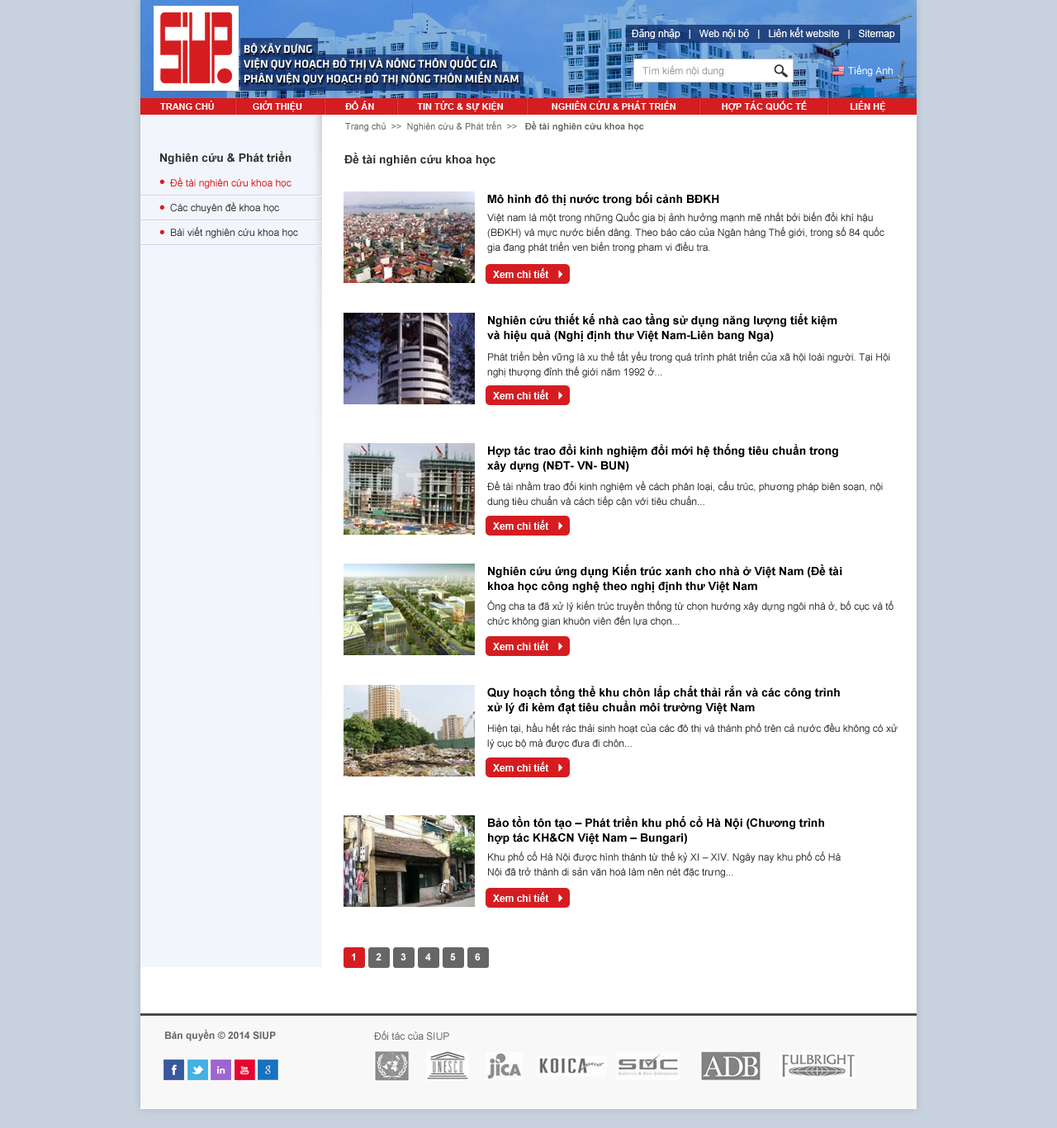
<style>
.page{position:relative;width:1057px;height:1128px;background:#ffffff}
.page>*{position:absolute;margin:0}
.t1{font:9.1px "ArialMT";color:#666666}
.t2{font:9.1px "Arial-BoldMT";color:#666666}
.t3{font:11.6px "Arial-BoldMT";color:#333333}
.t4{font:9.9px/24.8px "ArialMT";color:#333333}
.t5{font:9.9px/24.8px "ArialMT";color:#d51d21}
.t6{font:11.6px "Arial-BoldMT";color:#000000}
.t7{font:9.9px/14.9px "ArialMT";color:#333333}
.t8{font:9.9px "Arial-BoldMT";color:#ffffff}
.t9{font:11.6px/14.9px "Arial-BoldMT";color:#000000}
.t10{font:9.9px "Arial-BoldMT";color:#666666}
.t11{font:9.9px "ArialMT";color:#666666}
</style>
<div class="page">
<p class="t1" style="left:345px;top:121px;width:299px;height:11px">Trang chủ  &gt;&gt;  Nghiên cứu &amp; Phát trển  &gt;&gt;   <span class="t2">Đề tài nghiên cứu khoa học</span></p>
<p class="t3" style="left:160px;top:151px;width:131px;height:13px">Nghiên cứu &amp; Phát triển</p>
<p class="t3" style="left:344px;top:153px;width:151px;height:13px">Đề tài nghiên cứu khoa học</p>
<p class="t4" style="left:170px;top:177px;width:128px;height:62px"><span class="t5">Đề tài nghiên cứu khoa học<br></span>Các chuyên đề khoa học<br>Bài viết nghiên cứu khoa học</p>
<p class="t6" style="left:487px;top:192px;width:232px;height:14px">Mô hình đô thị nước trong bối cảnh BĐKH</p>
<p class="t7" style="left:487px;top:212px;width:397px;height:41px">Việt nam là một trong những Quốc gia bị ảnh hưởng mạnh mẽ nhất bởi biến đổi khí hậu (BĐKH) và mực nước biển dâng. Theo báo cáo của Ngân hàng Thế giới, trong số 84 quốc gia đang phát triển ven biển trong pham vi điều tra.</p>
<p class="t8" style="left:493px;top:268px;width:56px;height:10px">Xem chi tiết</p>
<p class="t9" style="left:487px;top:314px;width:350px;height:28px">Nghiên cứu thiết kế nhà cao tầng sử dụng năng lượng tiết kiệm và hiệu quả (Nghị định thư Việt Nam-Liên bang Nga)</p>
<p class="t7" style="left:487px;top:352px;width:403px;height:26px">Phát triển bền vững là xu thế tất yếu trong quá trình phát triển của xã hội loài người. Tại Hội nghị thượng đỉnh thế giới năm 1992 ở...</p>
<p class="t8" style="left:493px;top:390px;width:56px;height:10px">Xem chi tiết</p>
<p class="t9" style="left:487px;top:444px;width:351px;height:28px">Hợp tác trao đổi kinh nghiệm đổi mới hệ thống tiêu chuẩn trong xây dựng (NĐT- VN- BUN)</p>
<p class="t7" style="left:487px;top:481px;width:395px;height:27px">Đề tài nhằm trao đổi kinh nghiệm về cách phân loại, cấu trúc, phương pháp biên soạn, nội dung tiêu chuẩn và cách tiếp cận với tiêu chuẩn...</p>
<p class="t8" style="left:493px;top:520px;width:56px;height:10px">Xem chi tiết</p>
<p class="t9" style="left:488px;top:565px;width:354px;height:28px">Nghiên cứu ứng dụng Kiến trúc xanh cho nhà ở Việt Nam (Đề tài khoa học công nghệ theo nghị định thư Việt Nam</p>
<p class="t7" style="left:487px;top:600px;width:406px;height:27px">Ông cha ta đã xử lý kiến trúc truyền thống từ chọn hướng xây dựng ngôi nhà ở, bố cục và tổ chức không gian khuôn viên đến lựa chọn...</p>
<p class="t8" style="left:493px;top:641px;width:56px;height:10px">Xem chi tiết</p>
<p class="t9" style="left:487px;top:686px;width:353px;height:28px">Quy hoạch tổng thể khu chôn lấp chất thải rắn và các công trình xử lý đi kèm đạt tiêu chuẩn môi trường Việt Nam</p>
<p class="t7" style="left:487px;top:723px;width:410px;height:27px">Hiện tại, hầu hết rác thải sinh hoạt của các đô thị và thành phố trên cả nước đều không có xử lý cục bộ mà được đưa đi chôn...</p>
<p class="t8" style="left:493px;top:762px;width:56px;height:10px">Xem chi tiết</p>
<p class="t9" style="left:488px;top:816px;width:336px;height:29px">Bảo tồn tôn tạo – Phát triển khu phố cổ Hà Nội (Chương trình hợp tác KH&amp;CN Việt Nam – Bungari)</p>
<p class="t7" style="left:488px;top:852px;width:352px;height:26px">Khu phố cổ Hà Nội được hình thành từ thế kỷ XI – XIV. Ngày nay khu phố cổ Hà Nội đã trở thành di sản văn hoá làm nên nét đặc trưng...</p>
<p class="t8" style="left:493px;top:892px;width:56px;height:10px">Xem chi tiết</p>
<p class="t8" style="left:352px;top:953px;width:3px;height:8px">1</p>
<p class="t8" style="left:376px;top:953px;width:5px;height:8px">2</p>
<p class="t8" style="left:400px;top:953px;width:6px;height:8px">3</p>
<p class="t8" style="left:425px;top:953px;width:6px;height:8px">4</p>
<p class="t8" style="left:450px;top:953px;width:6px;height:8px">5</p>
<p class="t8" style="left:475px;top:953px;width:5px;height:8px">6</p>
<p class="t10" style="left:165px;top:1029px;width:111px;height:13px">Bản quyền © 2014 SIUP</p>
<p class="t11" style="left:374px;top:1031px;width:75px;height:10px">Đối tác của SIUP</p>
</div>
